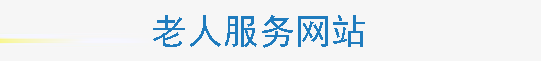
<style>
.page{position:relative;width:541px;height:61px;background:#f6f6f6}
.page>*{position:absolute;margin:0}
.t1{font:36px "SimHei";color:#1f7cbe}
</style>
<div class="page">
<p class="t1" style="left:153px;top:15px;width:212px;height:33px">老人服务网站</p>
</div>
